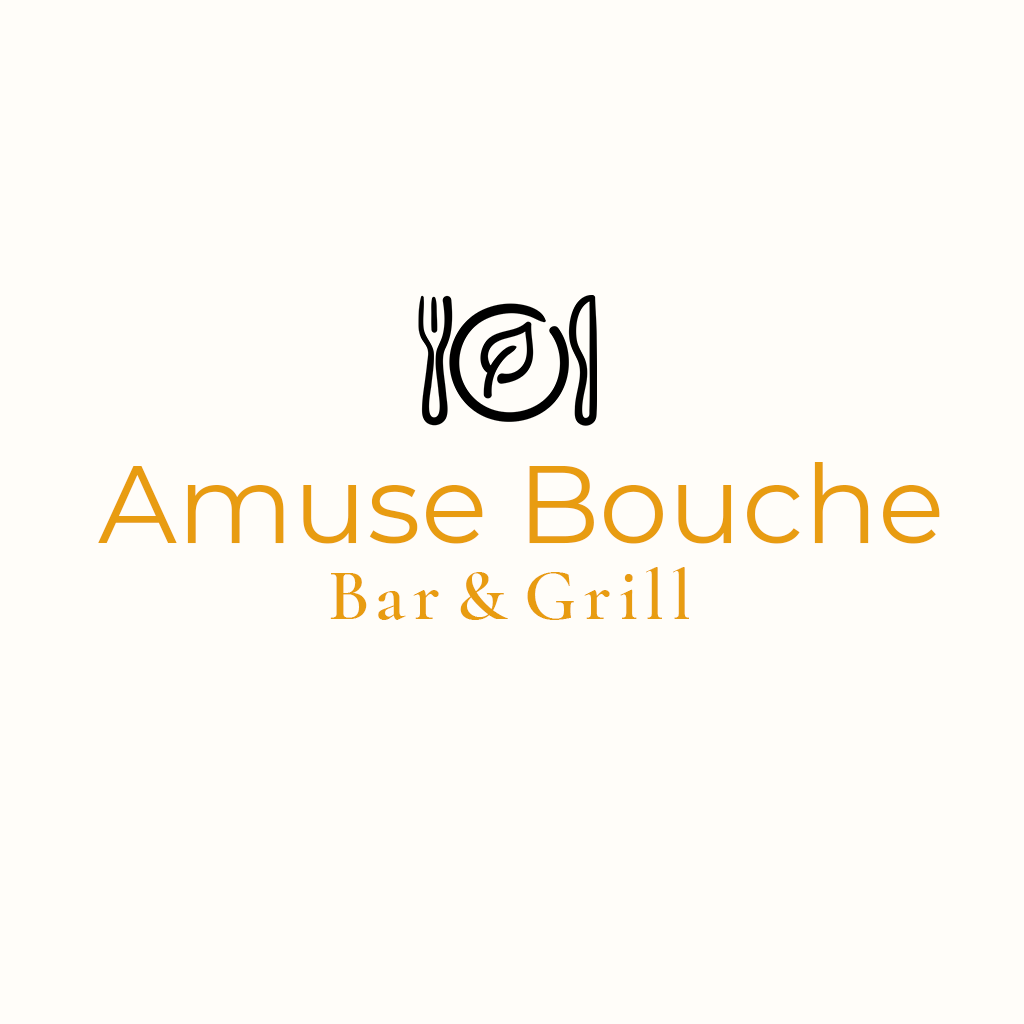
<style>
.page{position:relative;width:1024px;height:1024px;background:#fffdf9}
.page>*{position:absolute;margin:0}
.t1{font:110px "Montserrat-Regular";color:#e89c11}
.t2{font:72px "CormorantGaramond-SemiBold";color:#e89c11}
</style>
<div class="page">
<p class="t1" style="left:98px;top:462px;width:842px;height:82px">Amuse Bouche</p>
<p class="t2" style="left:330px;top:567px;width:359px;height:53px">B a r &amp; G r i l l</p>
</div>
